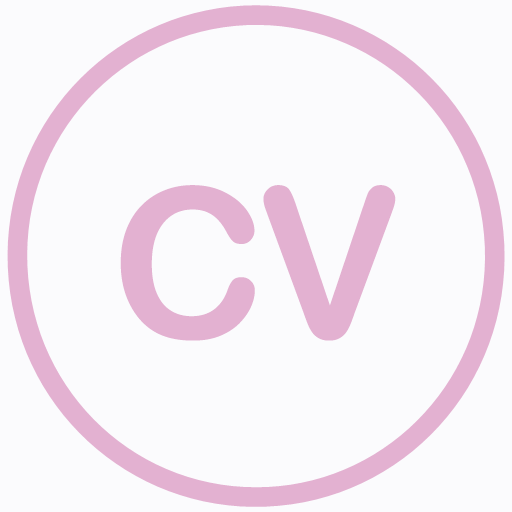
<style>
.page{position:relative;width:512px;height:512px;background:#fbfbfd}
.page>*{position:absolute;margin:0}
.t1{font:209.8px "ArialRoundedMTBold";color:#e3b1d1}
</style>
<div class="page">
<p class="t1" style="left:120px;top:185px;width:276px;height:156px">CV</p>
</div>
